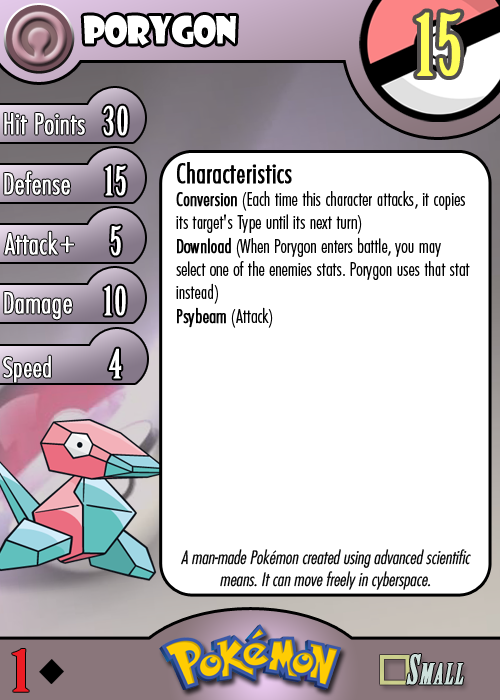
<style>
.page{position:relative;width:500px;height:700px;background:#ffffff}
.page>*{position:absolute;margin:0}
.t1{font:36.7px "ShowcardGothic-Reg";letter-spacing:-0.025em;color:#ffffff;scale:0.91 1}
.t2{font:83.3px "BirchStd";letter-spacing:0.025em;color:#fffd59;font-weight:bold}
.t3{font:27.8px "Futura-CondensedLight";color:#ffffff;font-weight:bold}
.t4{font:38.9px "BirchStd";letter-spacing:0.035em;color:#ffffff;font-weight:bold}
.t5{font:19.4px "FuturaCondensedBQ-Light";color:#010101}
.t6{font:27.8px "FuturaCondensedBQ-Light";color:#010101;font-weight:bold}
.t7{font:19.4px "FuturaCondensedBQ-Light";color:#010101;font-weight:bold}
.t8{font:30.6px "Futura-CondensedLight";color:#ffffff;font-weight:bold}
.t9{font:27.8px "FuturaCondensedBQ-Light";color:#ffffff;font-weight:bold}
.t10{font:18.1px "Futura-CondensedLight";color:#010101;font-style:italic}
.t11{font:55.6px "BirchStd";color:#ed1c24;font-weight:bold;scale:1.5 1}
</style>
<div class="page">
<p class="t1" style="left:83px;top:15px;width:153px;height:31px">porygon</p>
<p class="t2" style="left:416px;top:12px;width:45px;height:64px">15</p>
<p class="t3" style="left:4px;top:113px;width:81px;height:22px">Hit Points</p>
<p class="t4" style="left:103px;top:105px;width:25px;height:31px">30</p>
<p class="t3" style="left:4px;top:171px;width:66px;height:24px">Defense</p>
<p class="t4" style="left:105px;top:165px;width:21px;height:31px">15</p>
<p class="t5" style="left:176px;top:162px;width:294px;height:166px"><span class="t6">Characteristics<br></span><span class="t7">Conversion</span> (Each time this character attacks, it copies its target's Type until its next turn)<br><span class="t7">Download</span> (When Porygon enters battle, you may select one of the enemies stats. Porygon uses that stat instead)<br><span class="t7">Psybeam</span> (Attack)</p>
<p class="t3" style="left:4px;top:231px;width:54px;height:24px">Attack</p>
<p class="t4" style="left:111px;top:225px;width:10px;height:31px">5</p>
<p class="t8" style="left:60px;top:236px;width:14px;height:17px">+</p>
<p class="t3" style="left:4px;top:292px;width:68px;height:28px">Damage</p>
<p class="t4" style="left:104px;top:285px;width:22px;height:31px">10</p>
<p class="t4" style="left:109px;top:348px;width:13px;height:31px">4</p>
<p class="t9" style="left:3px;top:355px;width:48px;height:28px">Speed</p>
<p class="t10" style="left:181px;top:549px;width:290px;height:41px;text-align:center">A man-made Pokémon created using advanced scientific means. It can move freely in cyberspace.</p>
<p class="t11" style="left:12px;top:649px;width:17px;height:43px">1</p>
</div>
